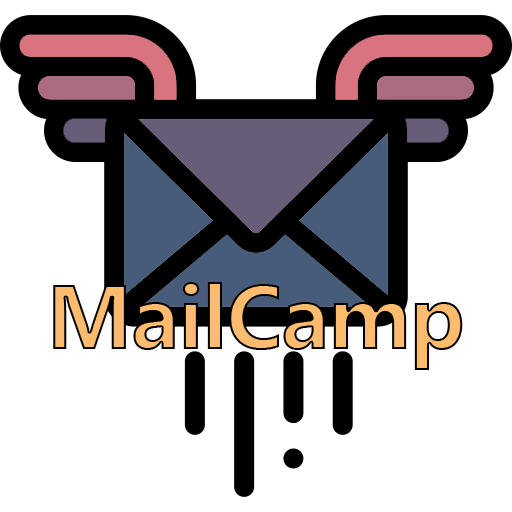
<style>
.page{position:relative;width:512px;height:512px;background:#ffffff}
.page>*{position:absolute;margin:0}
.t1{font:90.7px "SegoeUI-Bold";letter-spacing:-0.02em;color:#fcbb6d}
</style>
<div class="page">
<p class="t1" style="left:53px;top:282px;width:410px;height:88px">MailCamp</p>
</div>
